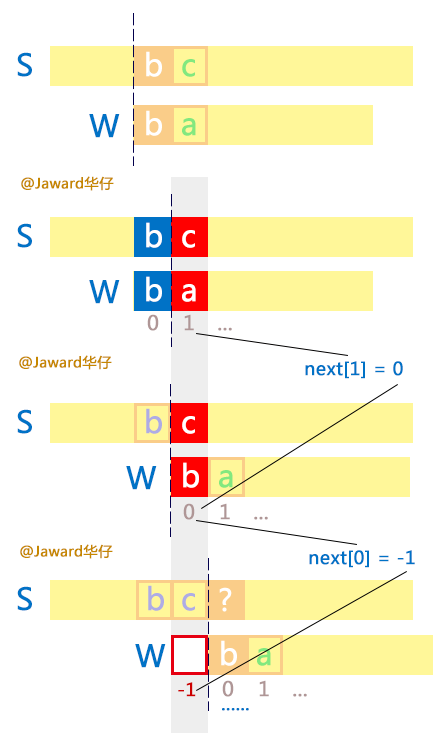
<style>
.page{position:relative;width:433px;height:733px;background:#ffffff}
.page>*{position:absolute;margin:0}
.t1{font:30px "MicrosoftYaHei";color:#0072c6;font-weight:bold}
.t2{font:30px "MicrosoftYaHei";color:#ffffff;font-weight:bold}
.t3{font:30px "MicrosoftYaHei";color:#82e87f;font-weight:bold}
.t4{font:14px "MicrosoftYaHei";color:#c68700;font-weight:bold}
.t5{font:19.8px "MicrosoftYaHei";color:#af9696;font-weight:bold}
.t6{font:18px "MicrosoftYaHei";color:#0072c6;font-weight:bold}
.t7{font:30px "MicrosoftYaHei";color:#aeace5;font-weight:bold}
.t8{font:18px "MicrosoftYaHei";color:#cc0000;font-weight:bold}
</style>
<div class="page">
<p class="t1" style="left:17px;top:52px;width:15px;height:25px">S</p>
<p class="t2" style="left:146px;top:51px;width:16px;height:26px">b</p>
<p class="t3" style="left:182px;top:59px;width:13px;height:18px">c</p>
<p class="t2" style="left:146px;top:110px;width:16px;height:26px">b</p>
<p class="t1" style="left:89px;top:114px;width:31px;height:24px">W</p>
<p class="t3" style="left:182px;top:118px;width:14px;height:18px">a</p>
<p class="t4" style="left:21px;top:176px;width:93px;height:15px">@Jaward华仔</p>
<p class="t2" style="left:146px;top:222px;width:16px;height:26px">b</p>
<p class="t1" style="left:17px;top:223px;width:15px;height:25px">S</p>
<p class="t2" style="left:182px;top:230px;width:13px;height:18px">c</p>
<p class="t1" style="left:89px;top:280px;width:31px;height:24px">W</p>
<p class="t2" style="left:146px;top:276px;width:16px;height:26px">b</p>
<p class="t2" style="left:182px;top:284px;width:14px;height:18px">a</p>
<p class="t5" style="left:147px;top:314px;width:12px;height:17px">0</p>
<p class="t5" style="left:184px;top:314px;width:10px;height:17px">1</p>
<p class="t5" style="left:218px;top:327px;width:14px;height:4px">...</p>
<p class="t4" style="left:19px;top:355px;width:93px;height:15px">@Jaward华仔</p>
<p class="t6" style="left:305px;top:361px;width:98px;height:18px">next[1] = 0</p>
<p class="t1" style="left:17px;top:409px;width:15px;height:25px">S</p>
<p class="t7" style="left:146px;top:408px;width:16px;height:26px">b</p>
<p class="t2" style="left:182px;top:416px;width:13px;height:18px">c</p>
<p class="t2" style="left:183px;top:462px;width:16px;height:26px">b</p>
<p class="t1" style="left:126px;top:466px;width:31px;height:24px">W</p>
<p class="t3" style="left:219px;top:470px;width:14px;height:18px">a</p>
<p class="t5" style="left:183px;top:503px;width:12px;height:17px">0</p>
<p class="t5" style="left:220px;top:503px;width:10px;height:17px">1</p>
<p class="t5" style="left:254px;top:516px;width:14px;height:4px">...</p>
<p class="t4" style="left:20px;top:544px;width:93px;height:15px">@Jaward华仔</p>
<p class="t6" style="left:309px;top:550px;width:106px;height:18px">next[0] = -1</p>
<p class="t1" style="left:17px;top:586px;width:15px;height:25px">S</p>
<p class="t7" style="left:148px;top:585px;width:16px;height:26px">b</p>
<p class="t7" style="left:182px;top:593px;width:13px;height:18px">c</p>
<p class="t2" style="left:219px;top:587px;width:13px;height:25px">?</p>
<p class="t2" style="left:221px;top:640px;width:16px;height:26px">b</p>
<p class="t1" style="left:135px;top:644px;width:31px;height:24px">W</p>
<p class="t3" style="left:257px;top:648px;width:14px;height:18px">a</p>
<p class="t8" style="left:178px;top:682px;width:18px;height:15px">-1</p>
<p class="t5" style="left:222px;top:680px;width:12px;height:17px">0</p>
<p class="t5" style="left:259px;top:680px;width:10px;height:17px">1</p>
<p class="t5" style="left:293px;top:693px;width:14px;height:4px">...</p>
<p class="t6" style="left:222px;top:708px;width:27px;height:3px">......</p>
</div>
